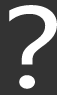
<style>
.page{position:relative;width:57px;height:95px;background:#333333}
.page>*{position:absolute;margin:0}
.t1{font:106.8px "MicrosoftYaHei";color:#ffffff;scale:1.15 1}
</style>
<div class="page">
<p class="t1" style="left:9px;top:5px;width:48px;height:84px">？</p>
</div>
